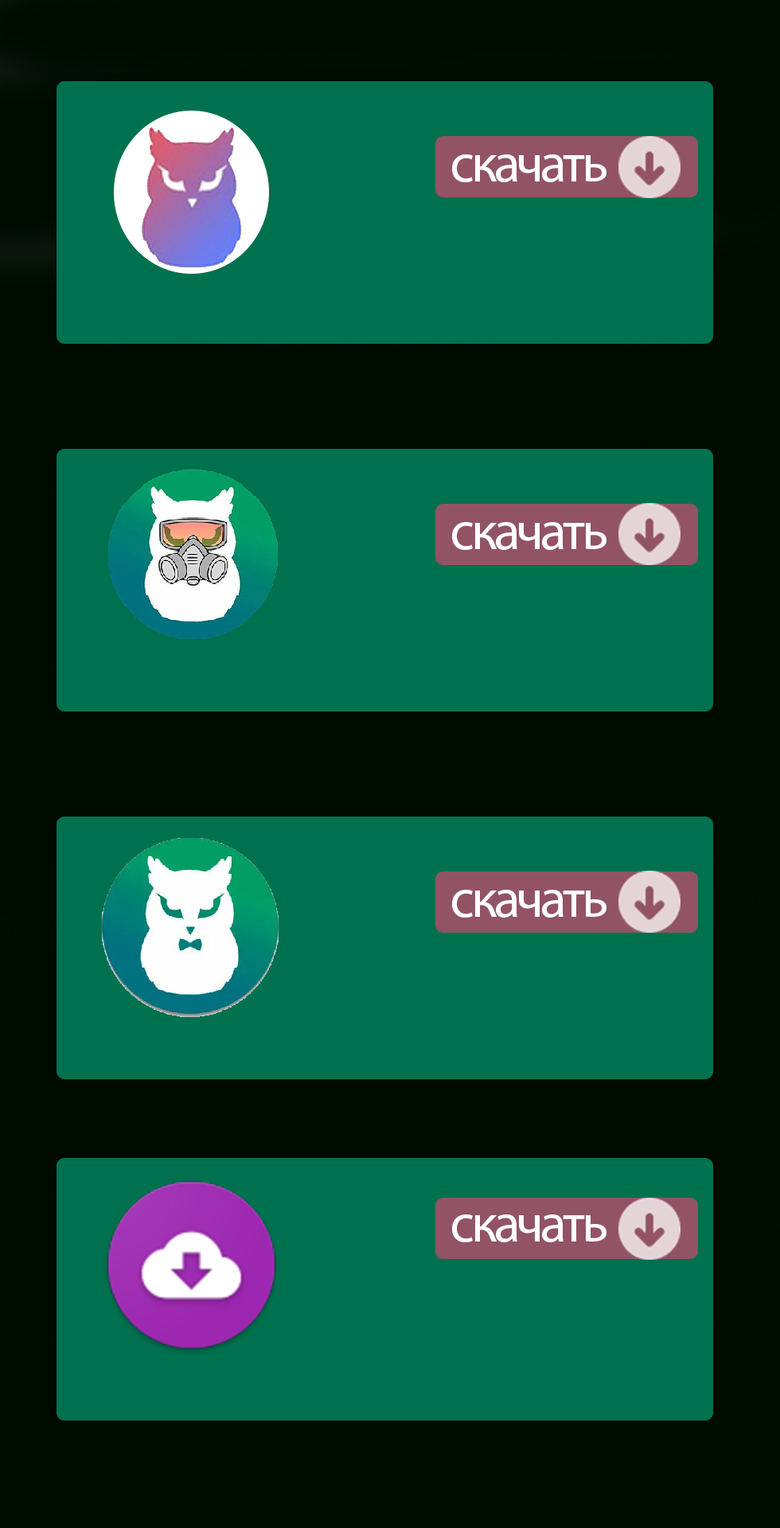
<style>
.page{position:relative;width:780px;height:1528px;background:#00714e}
.page>*{position:absolute;margin:0}
.t1{font:54px "MyriadPro-Regular";letter-spacing:-0.06em;color:#ffffff}
</style>
<div class="page">
<p class="t1" style="left:452px;top:154px;width:155px;height:28px">скачать</p>
<p class="t1" style="left:452px;top:522px;width:155px;height:28px">скачать</p>
<p class="t1" style="left:452px;top:890px;width:155px;height:28px">скачать</p>
<p class="t1" style="left:452px;top:1215px;width:155px;height:28px">скачать</p>
</div>
